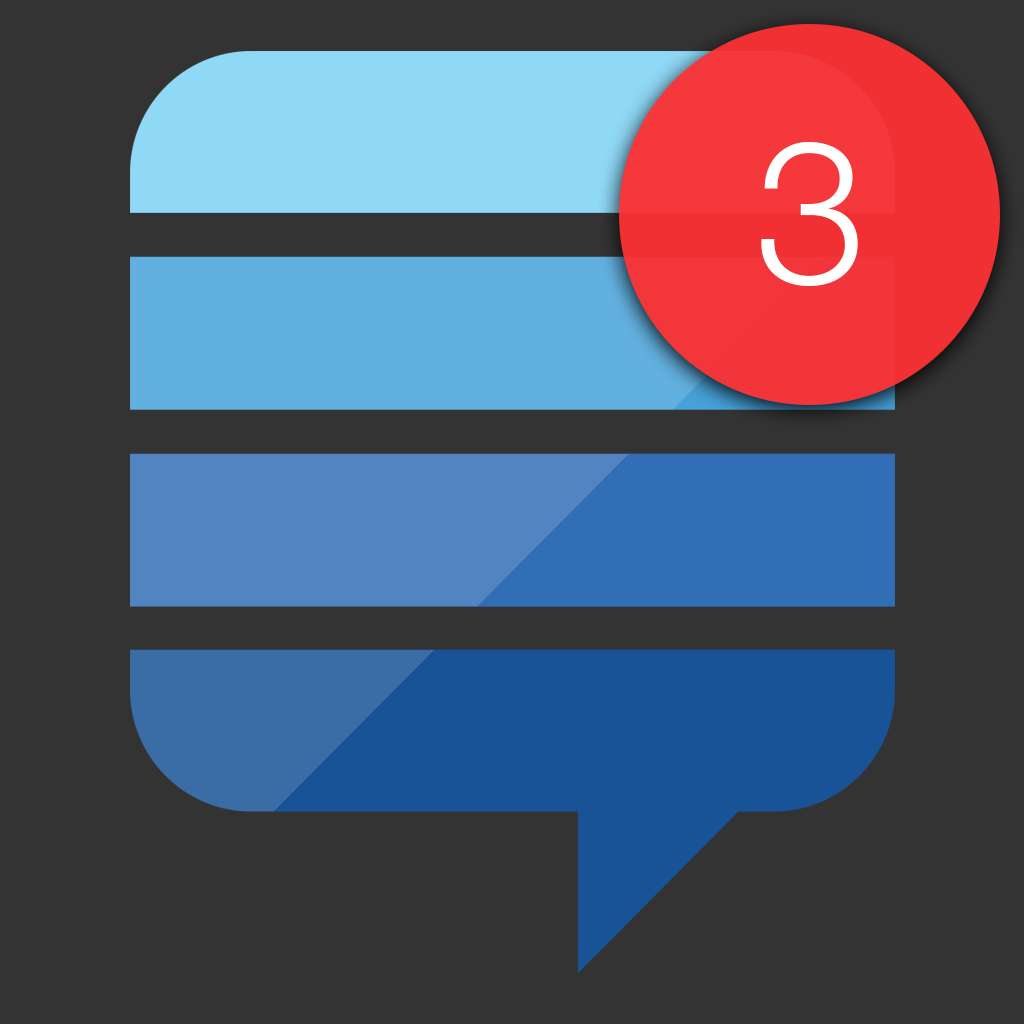
<style>
.page{position:relative;width:1024px;height:1024px;background:#333333}
.page>*{position:absolute;margin:0}
.t1{font:200px "HelveticaNeue-Light";color:#ffffff}
</style>
<div class="page">
<p class="t1" style="left:761px;top:142px;width:97px;height:144px">3</p>
</div>
